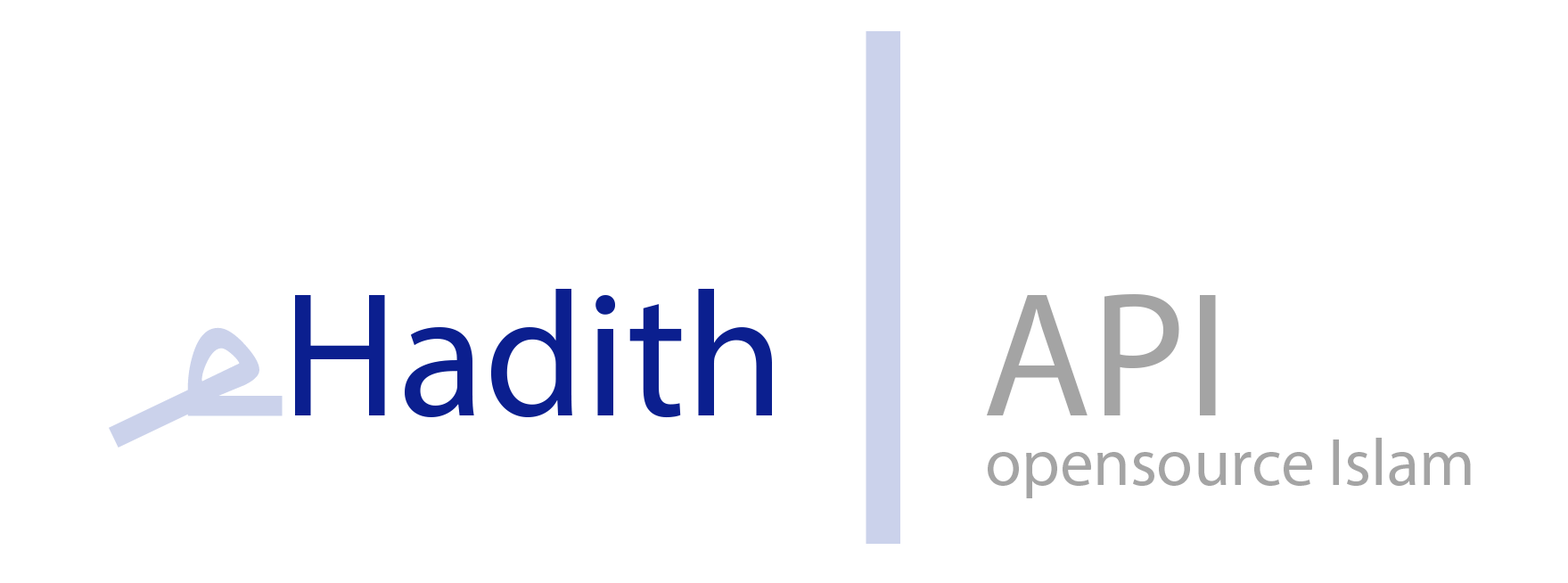
<style>
.page{position:relative;width:1568px;height:583px;background:#ffffff}
.page>*{position:absolute;margin:0}
.t1{font:178.3px "MyriadPro-Regular";color:#0b1f8f}
.t2{font:512.6px "MyriadPro-Regular";color:#cbd2eb}
.t3{font:178.3px "MyriadPro-Regular";color:#a4a4a4}
.t4{font:274.9px "PsuedoSaudi";color:#cbd2eb}
.t5{font:66.9px "MyriadPro-Regular";color:#a4a4a4}
</style>
<div class="page">
<p class="t1" style="left:295px;top:31px;width:921px;height:513px">Hadith <span class="t2">| </span><span class="t3">API</span></p>
<p class="t4" style="left:187px;top:327px;width:96px;height:89px">e</p>
<p class="t5" style="left:988px;top:438px;width:483px;height:60px">opensource Islam</p>
</div>
